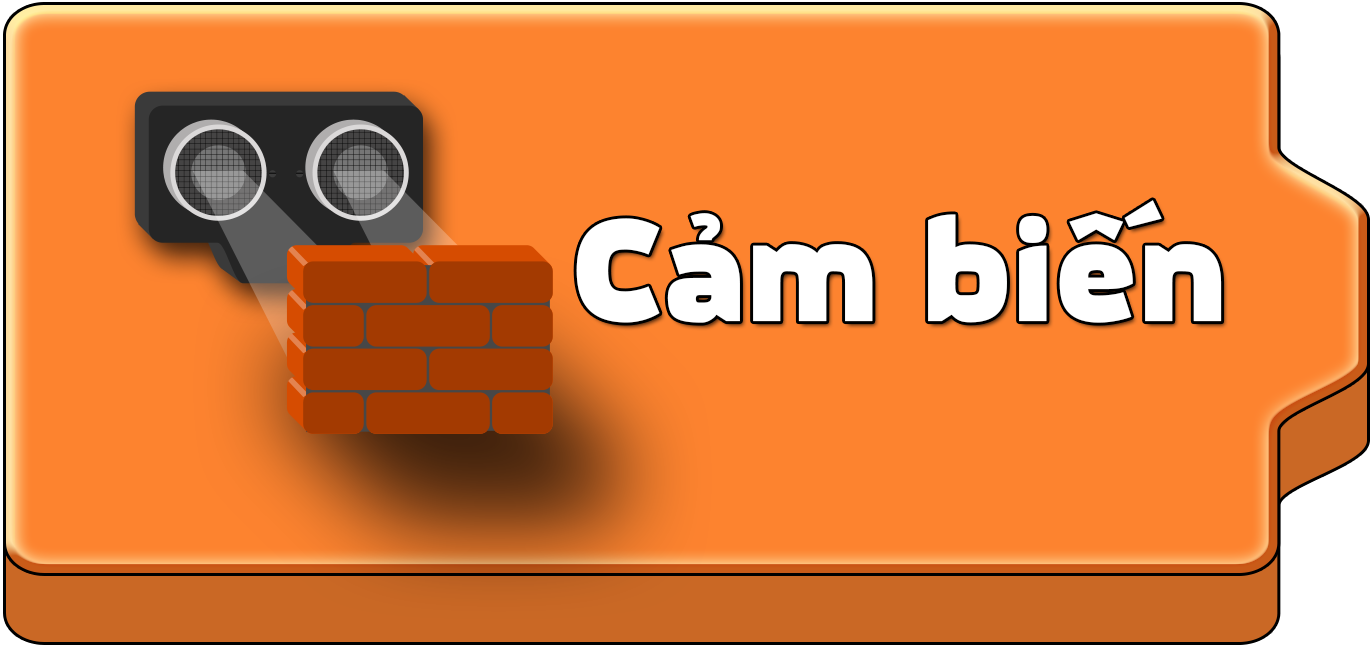
<style>
.page{position:relative;width:1371px;height:646px;background:#fd832f}
.page>*{position:absolute;margin:0}
.t1{font:142px "MovaviGrotesqueBlack";color:#ffffff}
</style>
<div class="page">
<p class="t1" style="left:576px;top:200px;width:646px;height:123px">Cảm biến</p>
</div>
